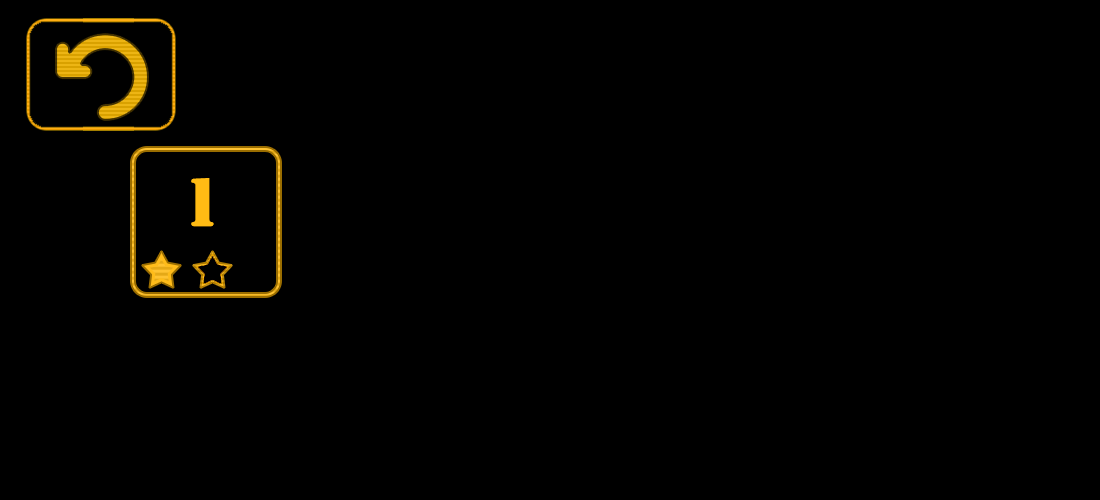
<style>
.page{position:relative;width:1100px;height:500px;background:#000000}
.page>*{position:absolute;margin:0}
.t1{font:72px "Stencil";color:#ffbb14}
</style>
<div class="page">
<p class="t1" style="left:191px;top:178px;width:23px;height:49px">1</p>
</div>
